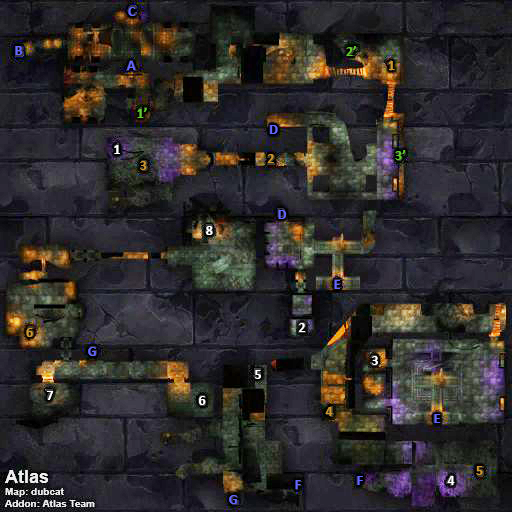
<style>
.page{position:relative;width:512px;height:512px}
.page>*{position:absolute;margin:0}
.t1{font:14px "Calibri-Bold";color:#6666ff}
.t2{font:14px "Calibri-Bold";color:#66cc33}
.t3{font:14px "Calibri-Bold";color:#cc9933}
.t4{font:14px "Calibri-Bold";color:#ffffff}
</style>
<div class="page">
<p class="t1" style="left:128px;top:7px;width:8px;height:9px">C</p>
<p class="t1" style="left:15px;top:46px;width:8px;height:9px">B</p>
<p class="t2" style="left:346px;top:46px;width:10px;height:10px">2’</p>
<p class="t1" style="left:127px;top:61px;width:9px;height:9px">A</p>
<p class="t3" style="left:388px;top:61px;width:7px;height:9px">1</p>
<p class="t2" style="left:137px;top:108px;width:10px;height:10px">1’</p>
<p class="t1" style="left:270px;top:125px;width:8px;height:9px">D</p>
<p class="t4" style="left:114px;top:145px;width:6px;height:9px">1</p>
<p class="t2" style="left:395px;top:150px;width:11px;height:10px">3’</p>
<p class="t3" style="left:140px;top:161px;width:7px;height:9px">3</p>
<p class="t3" style="left:267px;top:154px;width:7px;height:9px">2</p>
<p class="t1" style="left:278px;top:210px;width:9px;height:9px">D</p>
<p class="t4" style="left:206px;top:226px;width:7px;height:9px">8</p>
<p class="t1" style="left:334px;top:280px;width:6px;height:9px">E</p>
<p class="t3" style="left:26px;top:328px;width:7px;height:9px">6</p>
<p class="t4" style="left:299px;top:323px;width:7px;height:9px">2</p>
<p class="t1" style="left:88px;top:347px;width:8px;height:9px">G</p>
<p class="t4" style="left:372px;top:356px;width:6px;height:9px">3</p>
<p class="t4" style="left:255px;top:370px;width:6px;height:9px">5</p>
<p class="t4" style="left:46px;top:391px;width:8px;height:9px">7</p>
<p class="t4" style="left:199px;top:396px;width:7px;height:9px">6</p>
<p class="t3" style="left:325px;top:407px;width:8px;height:9px">4</p>
<p class="t1" style="left:434px;top:414px;width:6px;height:9px">E</p>
<p class="t3" style="left:476px;top:466px;width:7px;height:9px">5</p>
<p class="t1" style="left:295px;top:480px;width:6px;height:9px">F</p>
<p class="t1" style="left:357px;top:476px;width:6px;height:9px">F</p>
<p class="t4" style="left:447px;top:476px;width:8px;height:9px">4</p>
<p class="t1" style="left:229px;top:495px;width:8px;height:9px">G</p>
</div>
